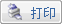
<style>
.page{position:relative;width:62px;height:24px;background:#f4f4f4}
.page>*{position:absolute;margin:0}
.t1{font:12px "SimSun";letter-spacing:0.075em;color:#3967a3}
</style>
<div class="page">
<p class="t1" style="left:31px;top:7px;width:24px;height:12px">打印</p>
</div>
